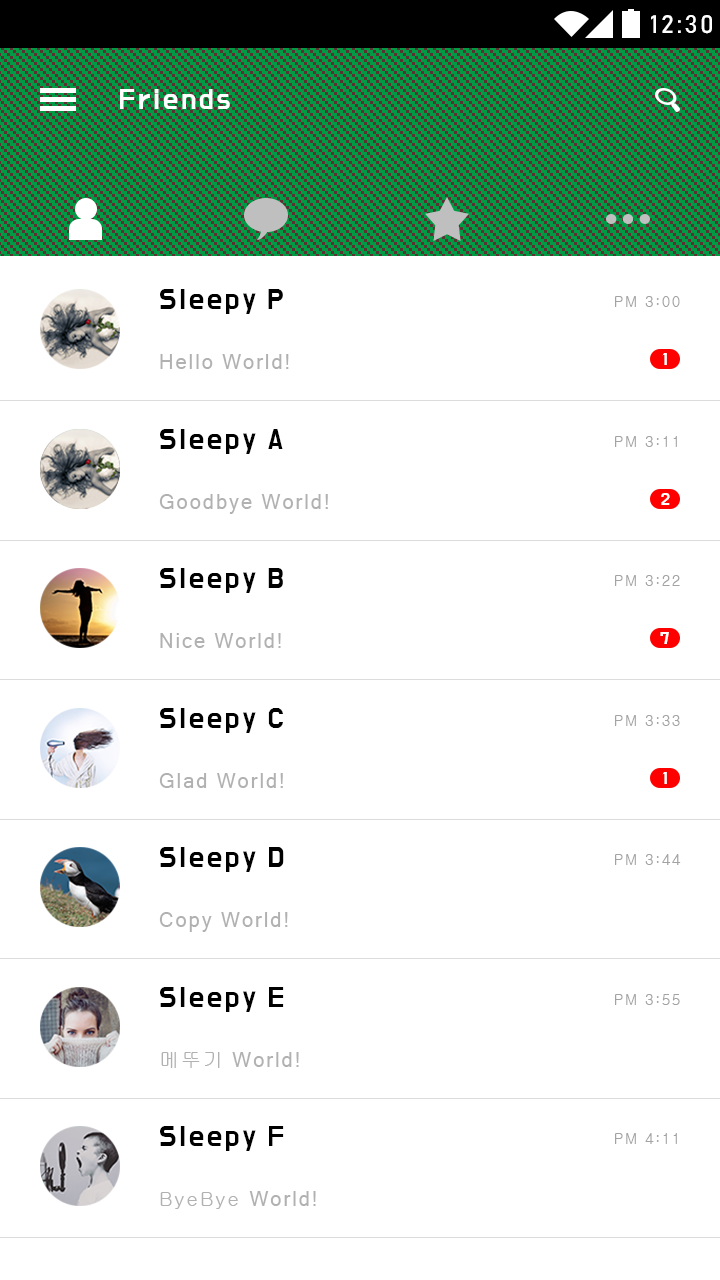
<style>
.page{position:relative;width:720px;height:1280px;background:#ffffff}
.page>*{position:absolute;margin:0}
.t1{font:25px "Bahnschrift";letter-spacing:0.1em;color:#ffffff}
.t2{font:30px "DoHyeon-Regular";letter-spacing:0.1em;color:#fefefe}
.t3{font:30px "DoHyeon-Regular";letter-spacing:0.1em;color:#000000}
.t4{font:15px "Gulim";letter-spacing:0.1em;color:#a3a3a3}
.t5{font:18px "DoHyeon-Regular";letter-spacing:0.1em;color:#ffffff}
.t6{font:20px "MicrosoftSansSerif";letter-spacing:0.1em;color:#b1b1b1}
.t7{font:20px "Gulim";letter-spacing:0.1em;color:#b1b1b1}
</style>
<div class="page">
<p class="t1" style="left:651px;top:15px;width:61px;height:19px">12:30</p>
<p class="t2" style="left:120px;top:89px;width:110px;height:20px">Friends</p>
<p class="t3" style="left:160px;top:289px;width:123px;height:25px">Sleepy P</p>
<p class="t4" style="left:615px;top:296px;width:65px;height:11px">PM 3:00</p>
<p class="t5" style="left:662px;top:353px;width:5px;height:12px">1</p>
<p class="t6" style="left:160px;top:354px;width:129px;height:15px">Hello World!</p>
<p class="t3" style="left:160px;top:429px;width:123px;height:25px">Sleepy A</p>
<p class="t4" style="left:615px;top:436px;width:62px;height:11px">PM 3:11</p>
<p class="t6" style="left:159px;top:494px;width:169px;height:20px">Goodbye World!</p>
<p class="t5" style="left:661px;top:493px;width:9px;height:12px">2</p>
<p class="t3" style="left:160px;top:568px;width:123px;height:25px">Sleepy B</p>
<p class="t4" style="left:615px;top:575px;width:65px;height:11px">PM 3:22</p>
<p class="t6" style="left:160px;top:633px;width:121px;height:15px">Nice World!</p>
<p class="t5" style="left:660px;top:632px;width:9px;height:12px">7</p>
<p class="t3" style="left:160px;top:708px;width:123px;height:25px">Sleepy C</p>
<p class="t4" style="left:615px;top:715px;width:65px;height:11px">PM 3:33</p>
<p class="t6" style="left:159px;top:773px;width:124px;height:15px">Glad World!</p>
<p class="t5" style="left:662px;top:772px;width:5px;height:12px">1</p>
<p class="t3" style="left:160px;top:847px;width:124px;height:25px">Sleepy D</p>
<p class="t4" style="left:615px;top:854px;width:66px;height:11px">PM 3:44</p>
<p class="t6" style="left:159px;top:912px;width:129px;height:20px">Copy World!</p>
<p class="t3" style="left:160px;top:987px;width:124px;height:25px">Sleepy E</p>
<p class="t4" style="left:615px;top:994px;width:65px;height:11px">PM 3:55</p>
<p class="t6" style="left:161px;top:1052px;width:138px;height:16px"><span class="t7">메뚜기</span> World!</p>
<p class="t3" style="left:160px;top:1126px;width:124px;height:25px">Sleepy F</p>
<p class="t4" style="left:615px;top:1133px;width:62px;height:11px">PM 4:11</p>
<p class="t7" style="left:160px;top:1191px;width:156px;height:18px">ByeBye <span class="t6">World!</span></p>
</div>
